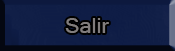
<style>
.page{position:relative;width:175px;height:51px;background:#101e46}
.page>*{position:absolute;margin:0}
.t1{font:24px "Raavi";color:#817d7d}
</style>
<div class="page">
<p class="t1" style="left:65px;top:18px;width:44px;height:15px">Salir</p>
</div>
